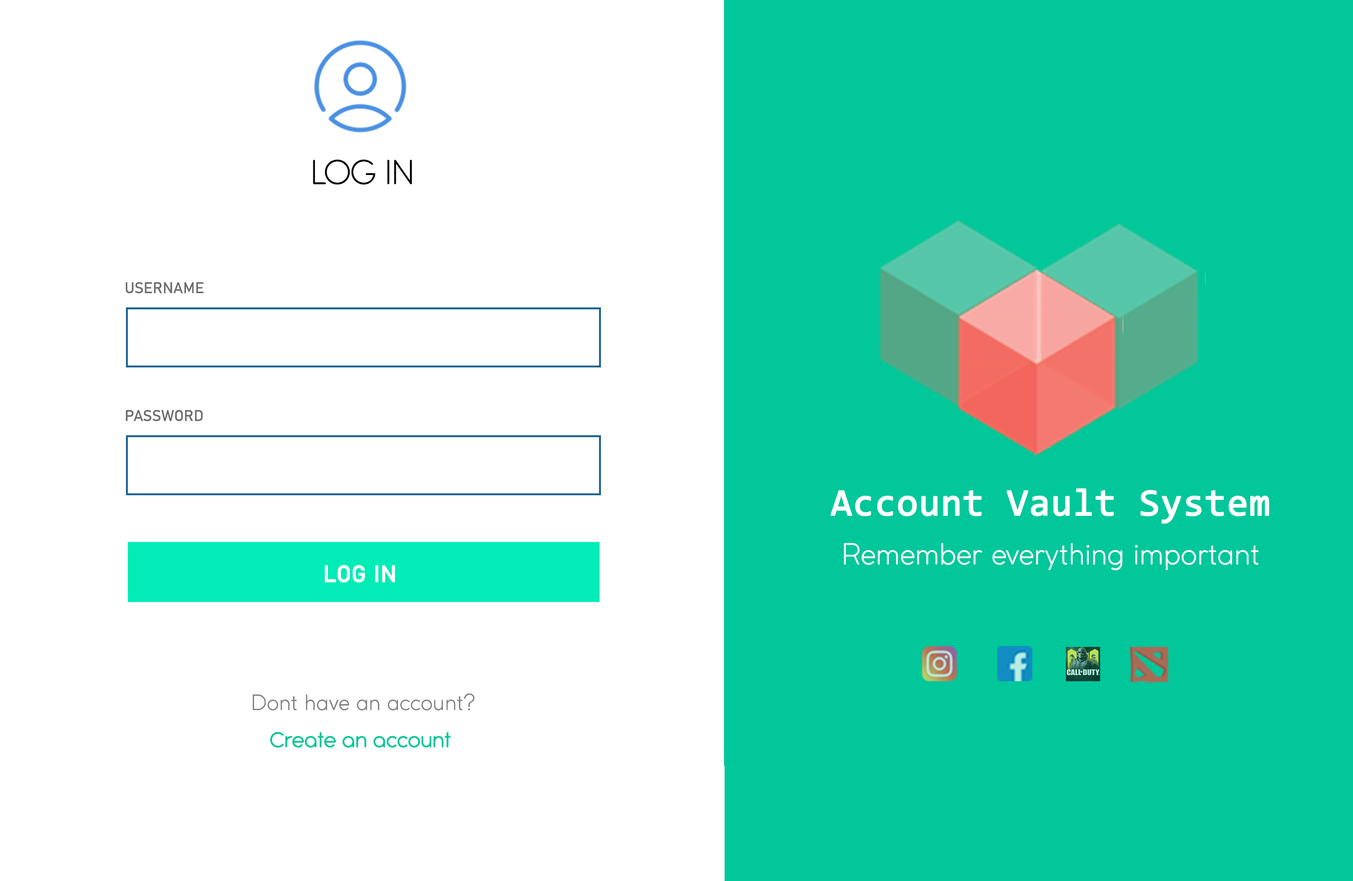
<style>
.page{position:relative;width:1353px;height:881px;background:#ffffff}
.page>*{position:absolute;margin:0}
.t1{font:38.2px "AntipastoPro-Light";color:#000000}
.t2{font:15.3px "Bahnschrift";color:#6d6d6d}
.t3{font:38.2px "Consolas";color:#ffffff;font-weight:bold}
.t4{font:28.6px "CocoGothic-Light";color:#ffffff}
.t5{font:22.9px "Bahnschrift";color:#ffffff;font-weight:bold}
.t6{font:21px "CocoGothic-Light";color:#818181}
.t7{font:5.5px "AntipastoPro-Light";color:#00c699;font-weight:bold}
</style>
<div class="page">
<p class="t1" style="left:313px;top:159px;width:99px;height:26px">LOG IN</p>
<p class="t2" style="left:126px;top:282px;width:77px;height:12px">USERNAME</p>
<p class="t2" style="left:126px;top:410px;width:77px;height:12px">PASSWORD</p>
<p class="t3" style="left:831px;top:488px;width:439px;height:36px">Account Vault System</p>
<p class="t4" style="left:844px;top:543px;width:415px;height:27px">Remember everything important</p>
<p class="t5" style="left:325px;top:565px;width:70px;height:18px">LOG IN</p>
<p class="t6" style="left:252px;top:693px;width:223px;height:18px">Dont have an account?</p>
<p class="t7" style="left:270px;top:732px;width:181px;height:16px;text-align:justify">Create an account</p>
</div>
